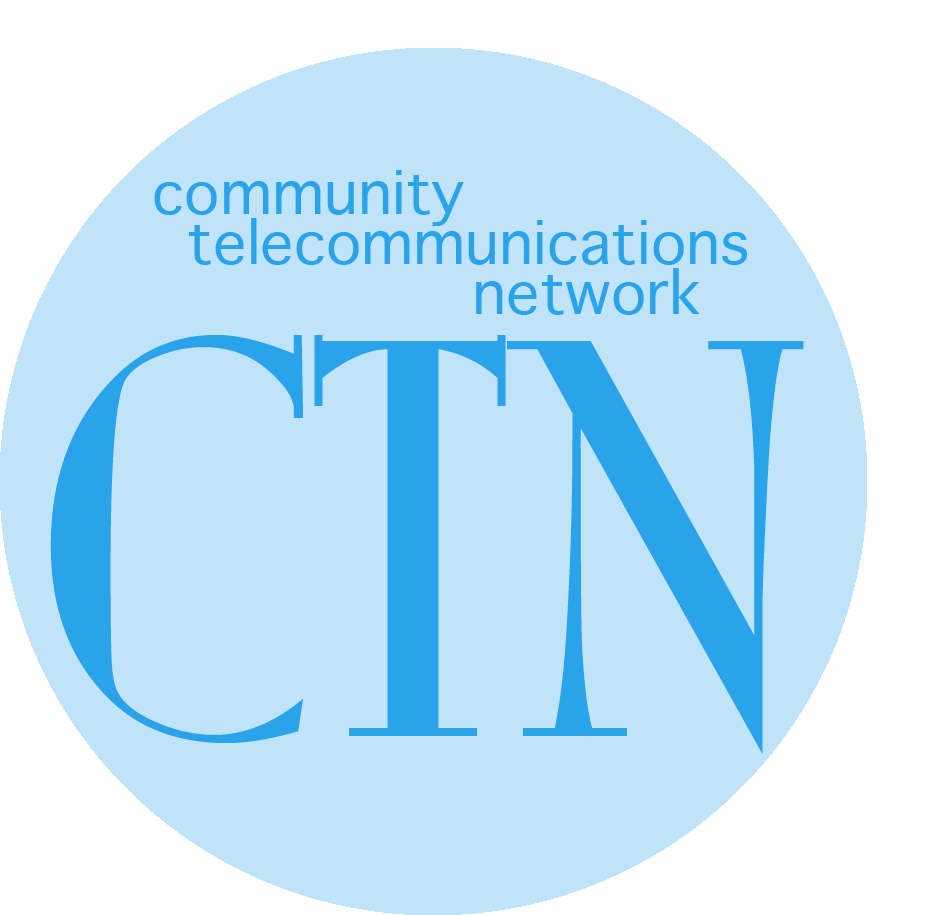
<style>
.page{position:relative;width:936px;height:915px;background:#bfe3f9}
.page>*{position:absolute;margin:0}
.t1{font:58.3px/50px "Thonburi";color:#2aa3eb}
.t2{font:500px "MonaLisaSolidITCTT";color:#2aa3eb}
</style>
<div class="page">
<p class="t1" style="left:154px;top:170px;width:594px;height:145px;text-align:right">community <br>telecommunications <br>network</p>
<p class="t2" style="left:50px;top:335px;width:754px;height:419px">CTN</p>
</div>
